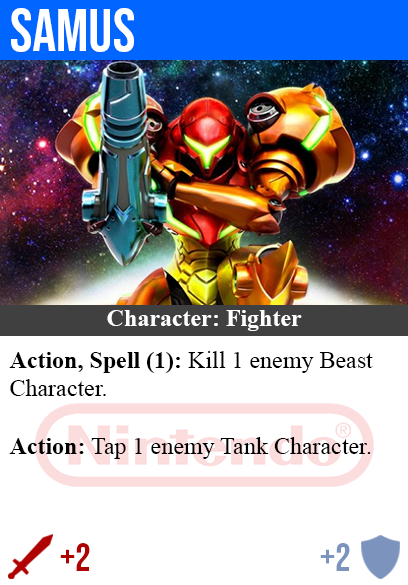
<style>
.page{position:relative;width:408px;height:585px;background:#ffffff}
.page>*{position:absolute;margin:0}
.t1{font:60px "BebasNeue-Regular";color:#ffffff}
.t2{font:24px "TimesNewRomanPS-BoldMT";color:#ffffff}
.t3{font:24px "TimesNewRomanPSMT";color:#000000}
.t4{font:24px "TimesNewRomanPS-BoldMT";color:#000000}
.t5{font:40px "BebasNeue-Regular";color:#af0202}
.t6{font:40px "BebasNeue-Regular";color:#7c94bd}
</style>
<div class="page">
<p class="t1" style="left:11px;top:8px;width:123px;height:44px">samus</p>
<p class="t2" style="left:107px;top:310px;width:195px;height:21px">Character: Fighter</p>
<p class="t3" style="left:9px;top:351px;width:364px;height:108px"><span class="t4">Action, Spell (1):</span> Kill 1 enemy Beast<br>Character.<br><br><span class="t4">Action:</span> Tap 1 enemy Tank Character.</p>
<p class="t5" style="left:60px;top:543px;width:30px;height:28px">+2</p>
<p class="t6" style="left:320px;top:543px;width:30px;height:28px">+2</p>
</div>
